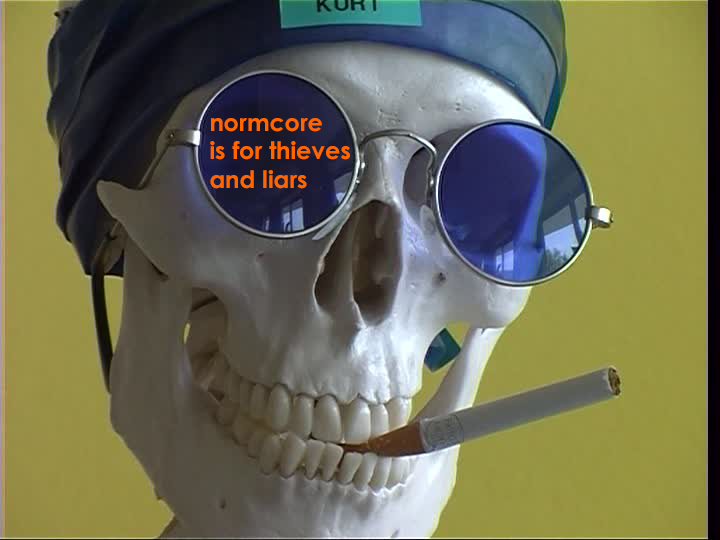
<style>
.page{position:relative;width:720px;height:540px}
.page>*{position:absolute;margin:0}
.t1{font:24px "CenturyGothic-Bold";color:#ff6600}
</style>
<div class="page">
<p class="t1" style="left:210px;top:118px;width:140px;height:71px">normcore<br>is for thieves <br>and liars</p>
</div>
